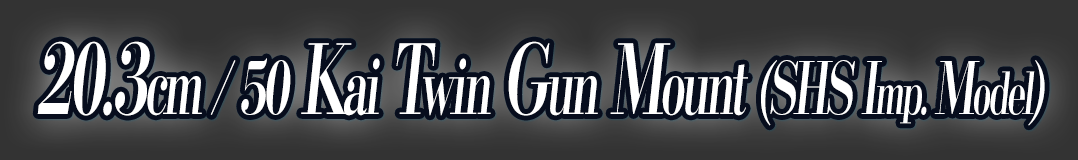
<style>
.page{position:relative;width:1078px;height:160px}
.page>*{position:absolute;margin:0}
.t1{font:72px "KochoStd-Heavy";letter-spacing:-0.08em;color:#ffffff;font-style:italic;scale:0.6 1}
.t2{font:96px "KochoStd-Heavy";letter-spacing:-0.08em;color:#ffffff;font-style:italic;scale:0.6 1}
.t3{font:76.8px "KochoStd-Heavy";letter-spacing:-0.08em;color:#ffffff;font-style:italic;scale:0.6 1}
.t4{font:57.6px "KochoStd-Heavy";letter-spacing:-0.08em;color:#ffffff;font-style:italic;scale:0.6 1}
</style>
<div class="page">
<p class="t1" style="left:37px;top:41px;width:1008px;height:85px"><span class="t2">20.3</span><span class="t3">cm</span> / 50<span class="t2"> K</span><span class="t3">ai</span><span class="t2"> T</span><span class="t3">win</span><span class="t2"> G</span><span class="t3">un</span><span class="t2"> M</span><span class="t3">ount </span>(SHS I<span class="t4">mp. </span>M<span class="t4">odel</span>)</p>
</div>
